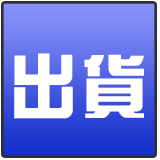
<style>
.page{position:relative;width:160px;height:160px;background:#ffffff}
.page>*{position:absolute;margin:0}
.t1{font:70.6px "DFZongYi-XB";letter-spacing:0.08em;color:#ffffff;scale:0.93 1}
</style>
<div class="page">
<p class="t1" style="left:14px;top:53px;width:130px;height:66px">出貨</p>
</div>
